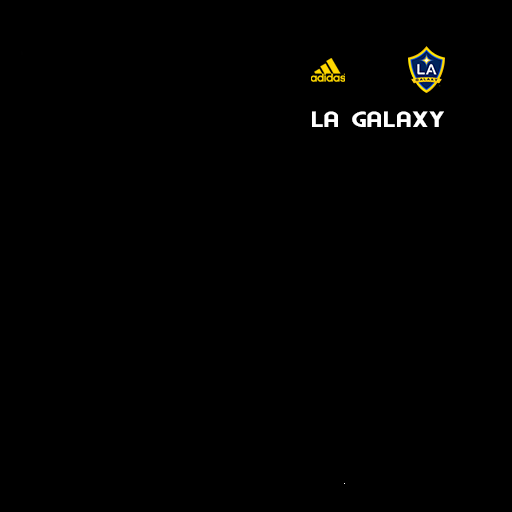
<style>
.page{position:relative;width:512px;height:512px;background:#000000}
.page>*{position:absolute;margin:0}
.t1{font:18.4px "Brandish";color:#ffffff;scale:1.38 1}
</style>
<div class="page">
<p class="t1" style="left:312px;top:111px;width:132px;height:16px">LA GALAXY</p>
</div>
